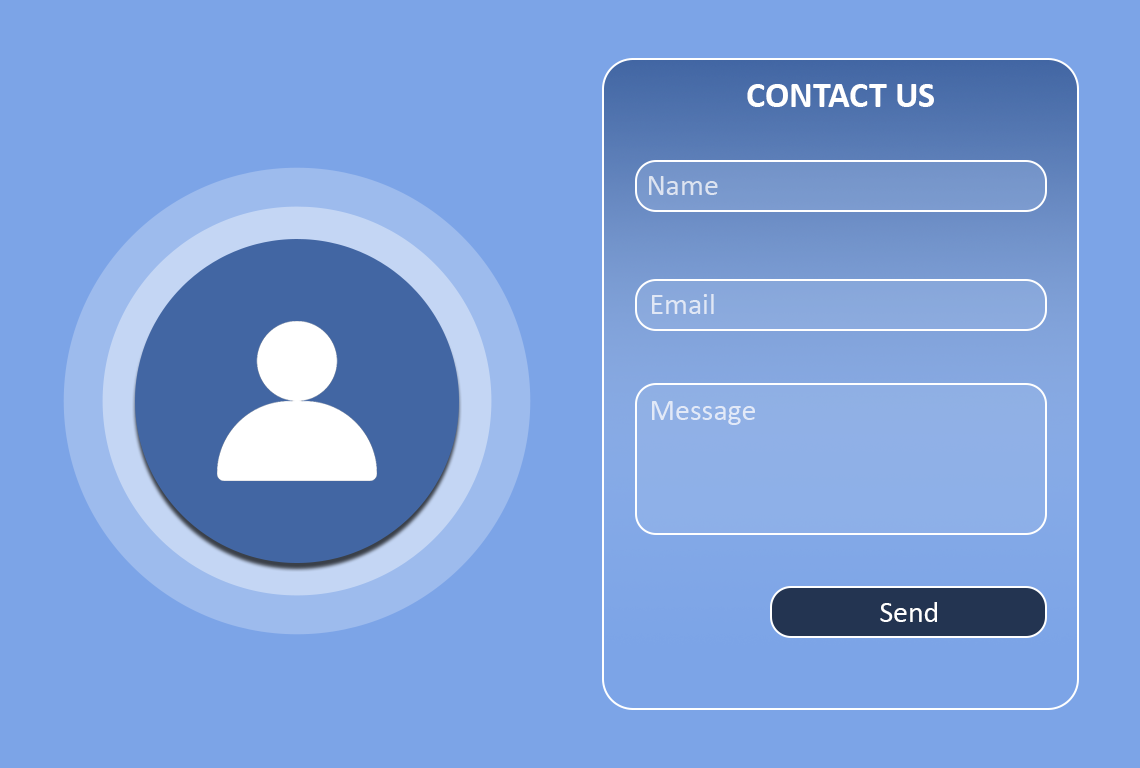
<style>
.page{position:relative;width:1140px;height:768px;background:#7ca4e7}
.page>*{position:absolute;margin:0}
.t1{font:36px "Calibri-Bold";color:#ffffff}
.t2{font:30px "Calibri";color:#dce3f0}
.t3{font:30px "Calibri";color:#e0e7f5}
.t4{font:30px "Calibri";color:#e2e9f7}
.t5{font:30px "Calibri";color:#ffffff}
</style>
<div class="page">
<p class="t1" style="left:747px;top:84px;width:187px;height:23px">CONTACT US</p>
<p class="t2" style="left:649px;top:176px;width:69px;height:19px">Name</p>
<p class="t3" style="left:652px;top:294px;width:62px;height:20px">Email</p>
<p class="t4" style="left:652px;top:401px;width:103px;height:24px">Message</p>
<p class="t5" style="left:880px;top:602px;width:57px;height:20px">Send</p>
</div>
